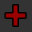
<style>
.page{position:relative;width:32px;height:32px;background:#333333}
.page>*{position:absolute;margin:0}
.t1{font:35px "FluffySlacksBTN"}
</style>
<div class="page">
<p class="t1" style="left:5px;top:5px;width:21px;height:21px">+</p>
</div>
